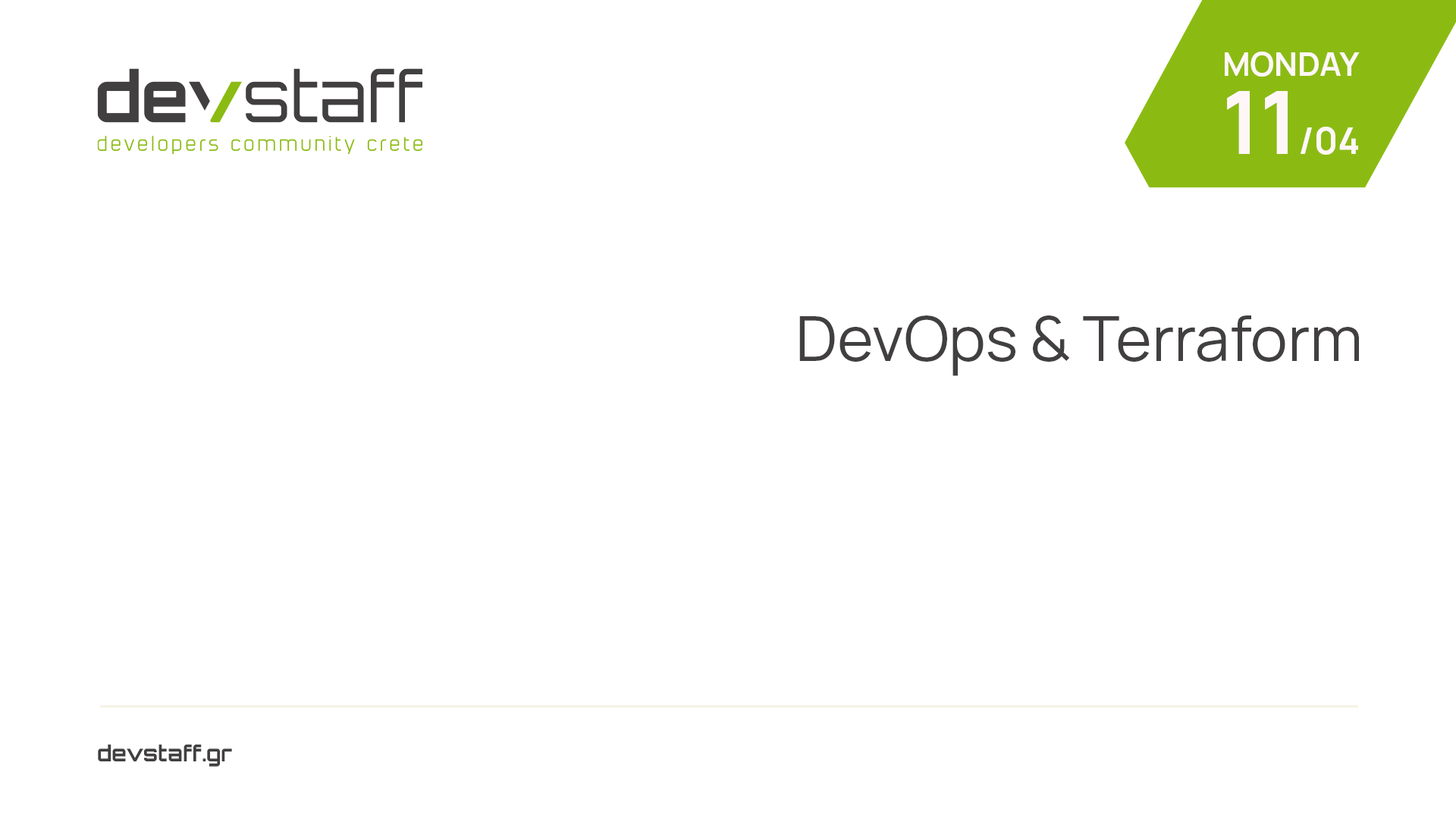
<style>
.page{position:relative;width:1456px;height:819px;background:#ffffff}
.page>*{position:absolute;margin:0}
.t1{font:32.5px "Manrope-Bold";color:#fff7f7}
.t2{font:36.4px "Manrope-Bold";color:#fff7f7}
.t3{font:87.8px "Manrope-Bold";color:#fff7f7}
.t4{font:62.2px "Manrope-Regular";color:#413f3f}
.t5{font:22px "Orbitron-Bold";color:#413f3f}
</style>
<div class="page">
<p class="t1" style="left:1225px;top:52px;width:135px;height:25px">MONDAY</p>
<p class="t2" style="left:1227px;top:91px;width:131px;height:64px"><span class="t3">11</span>/04</p>
<p class="t4" style="left:799px;top:315px;width:560px;height:61px">DevOps &amp; Terraform</p>
<p class="t5" style="left:98px;top:744px;width:134px;height:23px">devstaff.gr</p>
</div>
